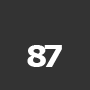
<style>
.page{position:relative;width:90px;height:90px;background:#333333}
.page>*{position:absolute;margin:0}
.t1{font:30px "Verdana-Bold";letter-spacing:-0.15em;color:#ffffff}
</style>
<div class="page">
<p class="t1" style="left:27px;top:45px;width:35px;height:22px">87</p>
</div>
